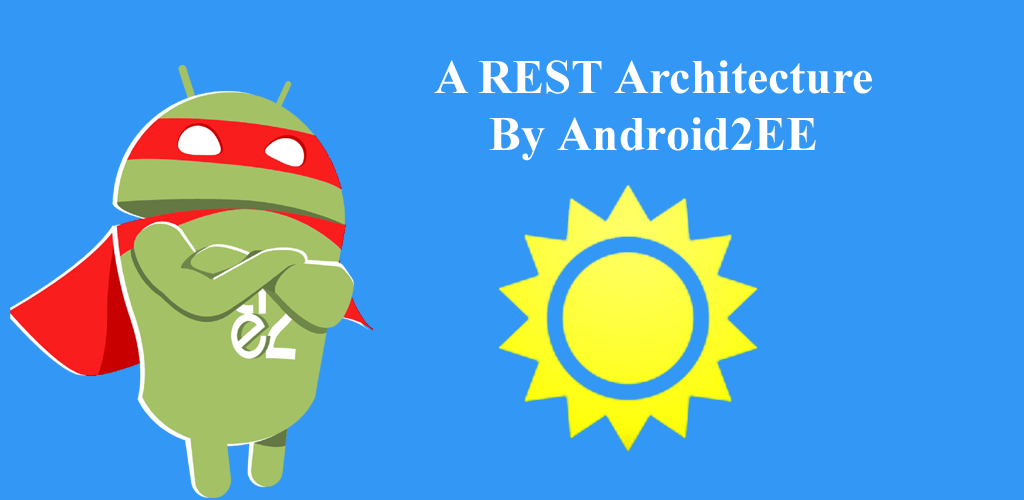
<style>
.page{position:relative;width:1024px;height:500px;background:#3397f5}
.page>*{position:absolute;margin:0}
.t1{font:48px "TimesNewRomanPS-BoldMT";color:#ffffff}
</style>
<div class="page">
<p class="t1" style="left:434px;top:60px;width:438px;height:101px;text-align:center">A REST Architecture <br>By Android2EE</p>
</div>
